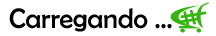
<style>
.page{position:relative;width:216px;height:36px;background:#ffffff}
.page>*{position:absolute;margin:0}
.t1{font:28px "BerlinSansFB-Reg";color:#000000}
</style>
<div class="page">
<p class="t1" style="left:9px;top:8px;width:163px;height:24px">Carregando ...</p>
</div>
